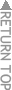
<style>
.page{position:relative;width:12px;height:90px;background:#ffffff}
.page>*{position:absolute;margin:0}
.t1{font:14px "TrebuchetMS";color:#929292}
</style>
<div class="page">
<p class="t1" style="left:0px;top:11px;width:12px;height:80px;rotate:90deg">RETURN TOP</p>
</div>
